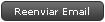
<style>
.page{position:relative;width:105px;height:22px}
.page>*{position:absolute;margin:0}
.t1{font:10px "Verdana";color:#ffffff}
</style>
<div class="page">
<p class="t1" style="left:15px;top:7px;width:74px;height:8px">Reenviar Email</p>
</div>
